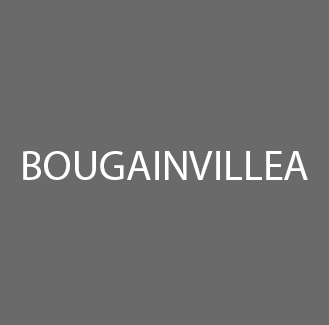
<style>
.page{position:relative;width:329px;height:325px;background:#6a6a6a}
.page>*{position:absolute;margin:0}
.t1{font:42px "MyriadPro-Regular";color:#ffffff;text-transform:uppercase}
</style>
<div class="page">
<p class="t1" style="left:23px;top:151px;width:285px;height:29px">Bougainvillea</p>
</div>
